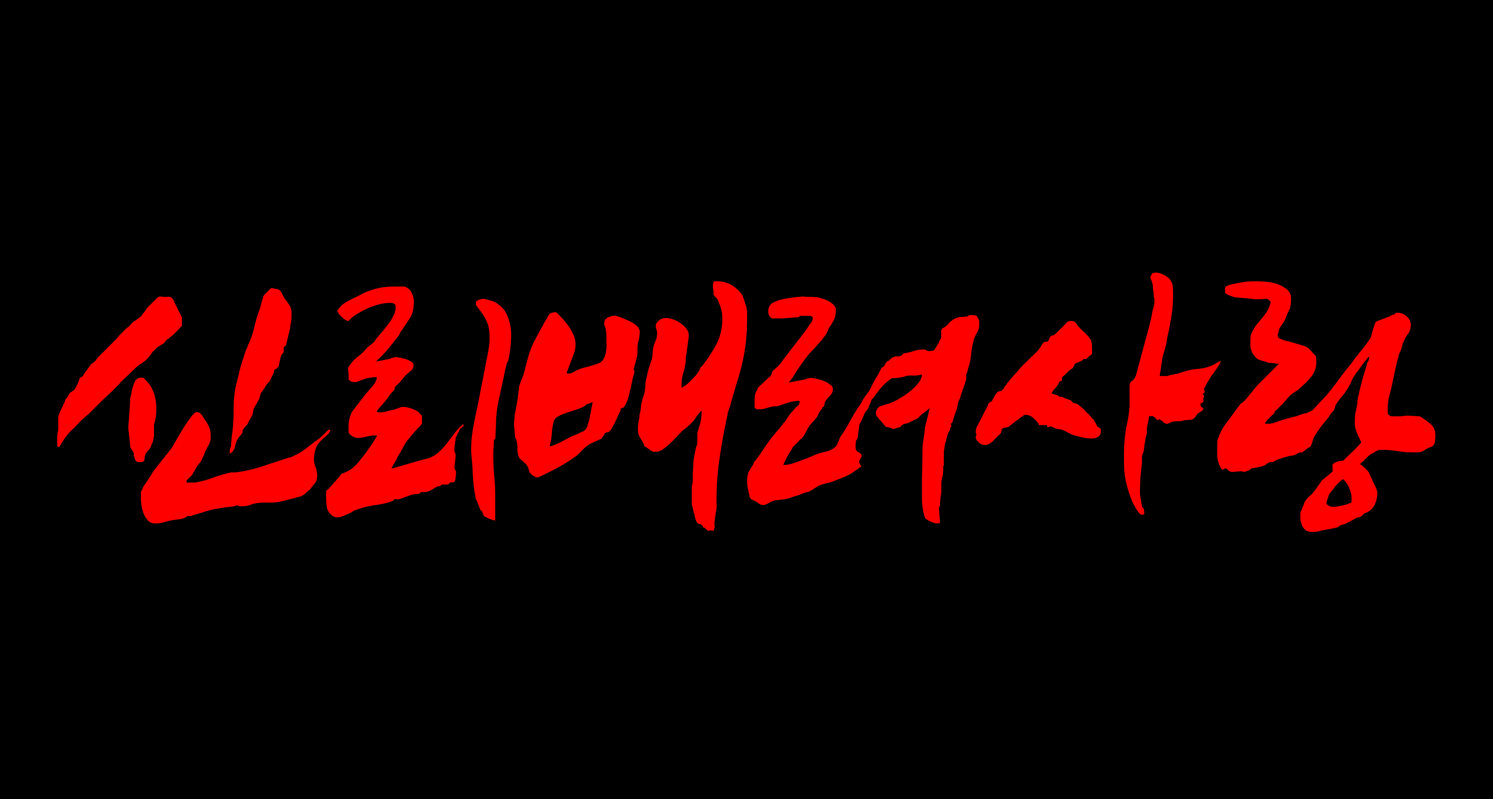
<style>
.page{position:relative;width:1493px;height:799px;background:#000000}
.page>*{position:absolute;margin:0}
.t1{font:324.3px "JSArirang-Regular";letter-spacing:-0.02em;color:#ff0000}
</style>
<div class="page">
<p class="t1" style="left:57px;top:273px;width:1379px;height:259px">신뢰배려사랑</p>
</div>
